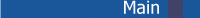
<style>
.page{position:relative;width:200px;height:18px;background:#1b589b}
.page>*{position:absolute;margin:0}
.t1{font:18px "Tahoma";color:#ffffff}
</style>
<div class="page">
<p class="t1" style="left:124px;top:0px;width:35px;height:14px">Main</p>
</div>
